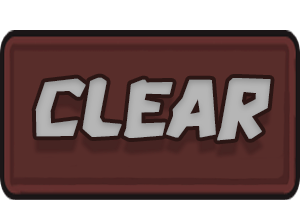
<style>
.page{position:relative;width:300px;height:200px;background:#582d2a}
.page>*{position:absolute;margin:0}
.t1{font:83.3px "Boulder";letter-spacing:-0.025em;color:#b6b6b6;font-weight:bold;font-style:italic}
</style>
<div class="page">
<p class="t1" style="left:35px;top:77px;width:236px;height:64px">Clear</p>
</div>
